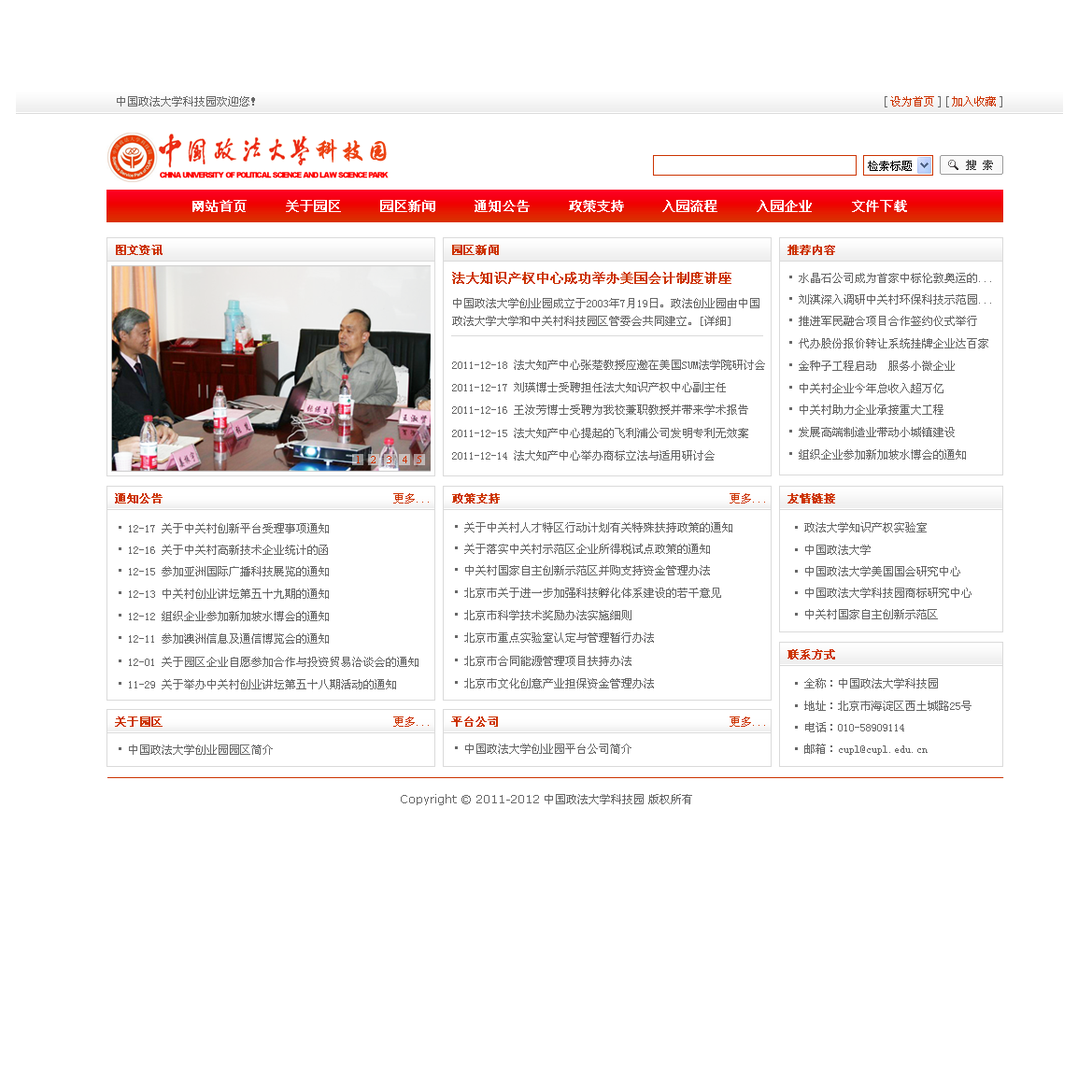
<style>
.page{position:relative;width:1092px;height:1092px;background:#ffffff}
.page>*{position:absolute;margin:0}
.t1{font:11.7px "SimSun";color:#cc3300}
.t2{font:24.3px "STXingkai";letter-spacing:0.025em;color:#ec4211;font-weight:bold}
.t3{font:7.8px "Arial-Black";letter-spacing:-0.075em;color:#ff0000}
.t4{font:13px "SimSun";color:#ffffff;font-weight:bold}
.t5{font:11.7px "SimSun";color:#cc3300;font-weight:bold}
.t6{font:13.1px "SimSun";color:#cc3300;font-weight:bold}
.t7{font:11.7px "SimSun";color:#666666}
.t8{font:11.2px/17.7px "SimSun";color:#666666}
.t9{font:11.2px "SimSun";color:#666666}
.t10{font:10.3px "TimesNewRomanPSMT";color:#cc3300}
</style>
<div class="page">
<p class="t1" style="left:890px;top:96px;width:44px;height:10px">设为首页</p>
<p class="t1" style="left:952px;top:96px;width:44px;height:10px">加入收藏</p>
<p class="t2" style="left:316px;top:138px;width:71px;height:25px">科技园</p>
<p class="t3" style="left:160px;top:172px;width:229px;height:6px">CHINA UNIVERSITY OF POLITICAL SCIENCE AND LAW SCIENCE PARK</p>
<p class="t4" style="left:192px;top:200px;width:55px;height:12px">网站首页</p>
<p class="t4" style="left:286px;top:200px;width:55px;height:12px">关于园区</p>
<p class="t4" style="left:380px;top:200px;width:55px;height:12px">园区新闻</p>
<p class="t4" style="left:475px;top:200px;width:55px;height:12px">通知公告</p>
<p class="t4" style="left:569px;top:200px;width:55px;height:12px">政策支持</p>
<p class="t4" style="left:662px;top:200px;width:55px;height:12px">入园流程</p>
<p class="t4" style="left:757px;top:200px;width:55px;height:12px">入园企业</p>
<p class="t4" style="left:852px;top:200px;width:55px;height:12px">文件下载</p>
<p class="t5" style="left:116px;top:245px;width:47px;height:10px">图文资讯</p>
<p class="t5" style="left:452px;top:245px;width:47px;height:10px">园区新闻</p>
<p class="t5" style="left:787px;top:245px;width:48px;height:10px">推荐内容</p>
<p class="t6" style="left:452px;top:272px;width:279px;height:12px">法大知识产权中心成功举办美国会计制度讲座</p>
<p class="t7" style="left:799px;top:273px;width:192px;height:10px">水晶石公司成为首家中标伦敦奥运的...</p>
<p class="t8" style="left:452px;top:298px;width:307px;height:28px">中国政法大学创业园成立于2003年7月19日。政法创业园由中国<br>政法大学大学和中关村科技园区管委会共同建立。[详细]</p>
<p class="t7" style="left:799px;top:294px;width:192px;height:11px">刘淇深入调研中关村环保科技示范园...</p>
<p class="t7" style="left:799px;top:316px;width:178px;height:10px">推进军民融合项目合作签约仪式举行</p>
<p class="t7" style="left:799px;top:338px;width:189px;height:10px">代办股份报价转让系统挂牌企业达百家</p>
<p class="t9" style="left:452px;top:360px;width:313px;height:10px">2011-12-18 法大知产中心张楚教授应邀在美国SUM法学院研讨会</p>
<p class="t7" style="left:799px;top:361px;width:156px;height:10px">金种子工程启动　服务小微企业</p>
<p class="t9" style="left:452px;top:382px;width:274px;height:10px">2011-12-17 刘瑛博士受聘担任法大知识产权中心副主任</p>
<p class="t7" style="left:800px;top:383px;width:143px;height:10px">中关村企业今年总收入超万亿</p>
<p class="t9" style="left:452px;top:404px;width:296px;height:11px">2011-12-16 王汝芳博士受聘为我校兼职教授并带来学术报告</p>
<p class="t7" style="left:800px;top:404px;width:143px;height:11px">中关村助力企业承接重大工程</p>
<p class="t9" style="left:452px;top:428px;width:296px;height:10px">2011-12-15 法大知产中心提起的飞利浦公司发明专利无效案</p>
<p class="t7" style="left:799px;top:427px;width:156px;height:10px">发展高端制造业带动小城镇建设</p>
<p class="t7" style="left:799px;top:449px;width:167px;height:11px">组织企业参加新加坡水博会的通知</p>
<p class="t10" style="left:357px;top:456px;width:3px;height:7px">1</p>
<p class="t10" style="left:371px;top:456px;width:5px;height:7px">2</p>
<p class="t10" style="left:387px;top:456px;width:4px;height:7px">3</p>
<p class="t10" style="left:403px;top:456px;width:4px;height:7px">4</p>
<p class="t10" style="left:417px;top:456px;width:4px;height:7px">5</p>
<p class="t9" style="left:452px;top:450px;width:263px;height:11px">2011-12-14 法大知产中心举办商标立法与适用研讨会</p>
<p class="t5" style="left:452px;top:493px;width:48px;height:10px">政策支持</p>
<p class="t5" style="left:787px;top:493px;width:48px;height:10px">友情链接</p>
<p class="t7" style="left:129px;top:523px;width:200px;height:10px">12-17 关于中关村创新平台受理事项通知</p>
<p class="t7" style="left:464px;top:522px;width:268px;height:10px">关于中关村人才特区行动计划有关特殊扶持政策的通知</p>
<p class="t7" style="left:804px;top:522px;width:123px;height:10px">政法大学知识产权实验室</p>
<p class="t7" style="left:129px;top:545px;width:199px;height:10px">12-16 关于中关村高新技术企业统计的函</p>
<p class="t7" style="left:464px;top:544px;width:246px;height:10px">关于落实中关村示范区企业所得税试点政策的通知</p>
<p class="t7" style="left:805px;top:545px;width:66px;height:10px">中国政法大学</p>
<p class="t7" style="left:129px;top:566px;width:200px;height:10px">12-15 参加亚洲国际广播科技展览的通知</p>
<p class="t7" style="left:465px;top:565px;width:245px;height:10px">中关村国家自主创新示范区并购支持资金管理办法</p>
<p class="t7" style="left:805px;top:566px;width:155px;height:10px">中国政法大学美国国会研究中心</p>
<p class="t7" style="left:129px;top:588px;width:200px;height:11px">12-13 中关村创业讲坛第五十九期的通知</p>
<p class="t7" style="left:464px;top:588px;width:257px;height:10px">北京市关于进一步加强科技孵化体系建设的若干意见</p>
<p class="t7" style="left:805px;top:588px;width:166px;height:10px">中国政法大学科技园商标研究中心</p>
<p class="t7" style="left:129px;top:611px;width:200px;height:10px">12-12 组织企业参加新加坡水博会的通知</p>
<p class="t7" style="left:464px;top:610px;width:167px;height:10px">北京市科学技术奖励办法实施细则</p>
<p class="t7" style="left:805px;top:609px;width:133px;height:10px">中关村国家自主创新示范区</p>
<p class="t7" style="left:129px;top:633px;width:200px;height:11px">12-11 参加澳洲信息及通信博览会的通知</p>
<p class="t7" style="left:464px;top:632px;width:190px;height:11px">北京市重点实验室认定与管理暂行办法</p>
<p class="t5" style="left:787px;top:649px;width:48px;height:10px">联系方式</p>
<p class="t7" style="left:129px;top:657px;width:289px;height:10px">12-01 关于园区企业自愿参加合作与投资贸易洽谈会的通知</p>
<p class="t7" style="left:464px;top:656px;width:167px;height:10px">北京市合同能源管理项目扶持办法</p>
<p class="t7" style="left:129px;top:679px;width:267px;height:10px">11-29 关于举办中关村创业讲坛第五十八期活动的通知</p>
<p class="t7" style="left:464px;top:678px;width:190px;height:10px">北京市文化创意产业担保资金管理办法</p>
<p class="t7" style="left:804px;top:678px;width:134px;height:10px">全称：中国政法大学科技园</p>
<p class="t7" style="left:804px;top:701px;width:167px;height:10px">地址：北京市海淀区西土城路25号</p>
<p class="t7" style="left:805px;top:722px;width:99px;height:10px">电话：010-58909114</p>
<p class="t7" style="left:129px;top:744px;width:144px;height:11px">中国政法大学创业园园区简介</p>
<p class="t7" style="left:465px;top:744px;width:166px;height:10px">中国政法大学创业园平台公司简介</p>
<p class="t7" style="left:804px;top:744px;width:124px;height:11px">邮箱：cupl@cupl.edu.cn</p>
</div>
